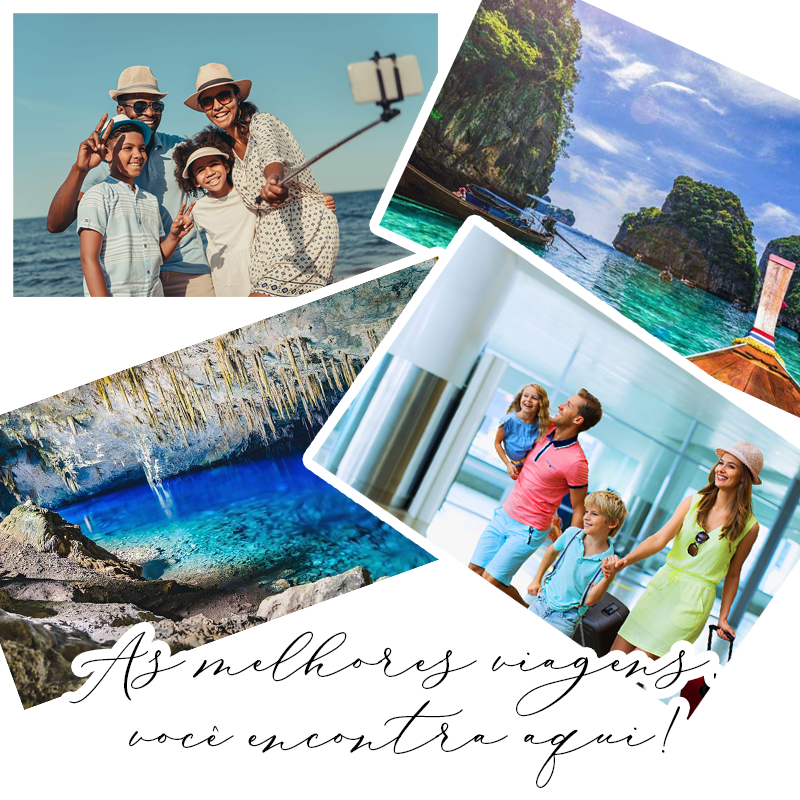
<style>
.page{position:relative;width:800px;height:800px;background:#ffffff}
.page>*{position:absolute;margin:0}
.t1{font:83.3px/75px "Biancha";letter-spacing:-0.005em;color:#000000}
</style>
<div class="page">
<p class="t1" style="left:69px;top:631px;width:648px;height:157px;text-align:center">As melhores viagens, <br>você encontra aqui!</p>
</div>
